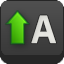
<style>
.page{position:relative;width:64px;height:64px}
.page>*{position:absolute;margin:0}
.t1{font:39.9px "AcuminConcept-Bold";color:#e2e2dd;scale:0.93 1}
</style>
<div class="page">
<p class="t1" style="left:31px;top:15px;width:25px;height:29px">A</p>
</div>
